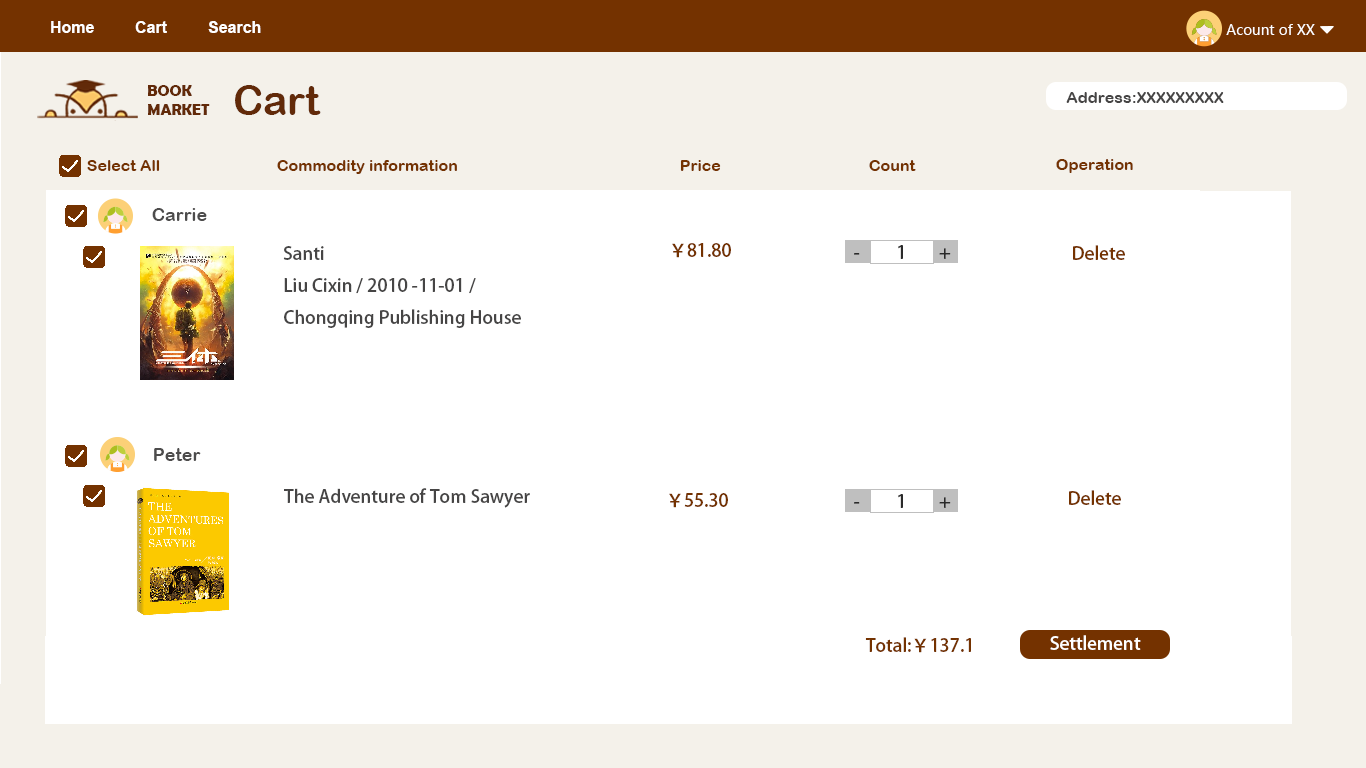
<style>
.page{position:relative;width:1366px;height:768px;background:#ffffff}
.page>*{position:absolute;margin:0}
.t1{font:16px "Arial-BoldMT";color:#ffffff}
.t2{font:14px "MicrosoftYaHeiUI";color:#ffffff}
.t3{font:15.9px/9.5px "BerlinSansFBDemi-Bold";color:#622a09}
.t4{font:40.9px "ArialRoundedMTBold";color:#622a09}
.t5{font:16px "ArialRoundedMTBold";color:#464545}
.t6{font:16px "ArialRoundedMTBold";color:#743200}
.t7{font:18px "ArialRoundedMTBold";color:#4d4c4c}
.t8{font:18px "AdobeHeitiStd-Regular";color:#464545}
.t9{font:18px "AdobeHeitiStd-Regular";color:#743200}
.t10{font:18px "AdobeHeitiStd-Regular";color:#2a2a2a}
.t11{font:18px "AdobeHeitiStd-Regular";color:#ffffff}
</style>
<div class="page">
<p class="t1" style="left:51px;top:21px;width:43px;height:12px">Home</p>
<p class="t1" style="left:135px;top:21px;width:32px;height:12px">Cart</p>
<p class="t1" style="left:208px;top:21px;width:53px;height:12px">Search</p>
<p class="t2" style="left:1226px;top:24px;width:89px;height:11px">Acount of XX</p>
<p class="t3" style="left:148px;top:85px;width:62px;height:30px">BOOK <br><br>MARKET</p>
<p class="t4" style="left:235px;top:85px;width:86px;height:30px">Cart</p>
<p class="t5" style="left:1066px;top:92px;width:158px;height:11px">Address:XXXXXXXXX</p>
<p class="t6" style="left:87px;top:160px;width:73px;height:11px">Select All</p>
<p class="t6" style="left:277px;top:160px;width:180px;height:14px">Commodity information</p>
<p class="t6" style="left:680px;top:160px;width:41px;height:11px">Price</p>
<p class="t6" style="left:869px;top:160px;width:47px;height:11px">Count</p>
<p class="t6" style="left:1056px;top:159px;width:77px;height:14px">Operation</p>
<p class="t7" style="left:152px;top:208px;width:55px;height:13px">Carrie</p>
<p class="t8" style="left:283px;top:246px;width:41px;height:14px">Santi</p>
<p class="t9" style="left:672px;top:243px;width:59px;height:15px">￥81.80</p>
<p class="t10" style="left:854px;top:245px;width:97px;height:14px">-       1        +</p>
<p class="t9" style="left:1073px;top:245px;width:52px;height:15px">Delete</p>
<p class="t8" style="left:284px;top:278px;width:237px;height:50px">Liu Cixin / 2010 -11-01 / <br>Chongqing Publishing House</p>
<p class="t7" style="left:154px;top:448px;width:47px;height:13px">Peter</p>
<p class="t8" style="left:284px;top:488px;width:246px;height:20px">The Adventure of Tom Sawyer</p>
<p class="t9" style="left:669px;top:493px;width:59px;height:15px">￥55.30</p>
<p class="t10" style="left:854px;top:494px;width:97px;height:14px">-       1        +</p>
<p class="t9" style="left:1069px;top:490px;width:52px;height:15px">Delete</p>
<p class="t9" style="left:865px;top:637px;width:106px;height:16px">Total:￥137.1</p>
<p class="t11" style="left:1050px;top:635px;width:91px;height:15px">Settlement</p>
</div>
